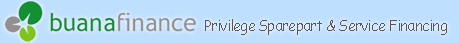
<style>
.page{position:relative;width:459px;height:43px;background:#bfdfff}
.page>*{position:absolute;margin:0}
.t1{font:14.7px "ComicSansMS";letter-spacing:-0.05em;color:#5a5557}
</style>
<div class="page">
<p class="t1" style="left:205px;top:19px;width:242px;height:16px">Privilege Sparepart &amp; Service Financing</p>
</div>
